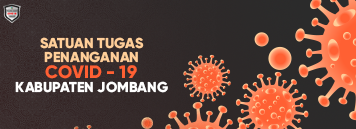
<style>
.page{position:relative;width:356px;height:129px}
.page>*{position:absolute;margin:0}
.t1{font:14.4px "Gilroy-ExtraBold";color:#ffce99}
.t2{font:18px "Gilroy-ExtraBold";color:#ff6033}
.t3{font:14.4px "Gilroy-ExtraBold";color:#ffffff}
</style>
<div class="page">
<p class="t1" style="left:40px;top:37px;width:104px;height:12px">SATUAN TUGAS</p>
<p class="t1" style="left:44px;top:51px;width:94px;height:12px">PENANGANAN</p>
<p class="t2" style="left:45px;top:65px;width:92px;height:14px">COVID - 19</p>
<p class="t3" style="left:15px;top:81px;width:153px;height:12px">KABUPATEN JOMBANG</p>
</div>
